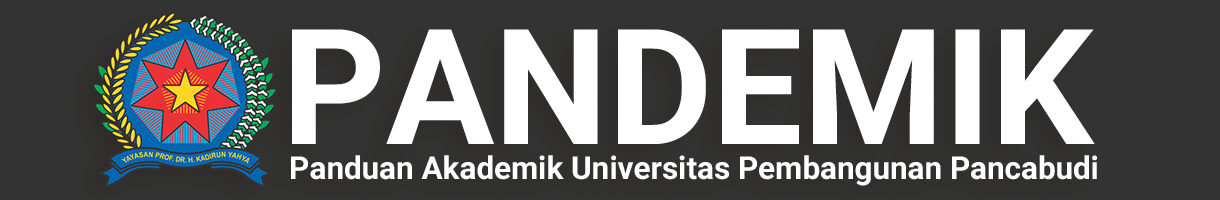
<style>
.page{position:relative;width:1220px;height:200px;background:#333333}
.page>*{position:absolute;margin:0}
.t1{font:161px "Roboto-Bold";color:#ffffff}
.t2{font:31.4px "Roboto-Bold";color:#ffffff}
</style>
<div class="page">
<p class="t1" style="left:292px;top:29px;width:803px;height:115px">PANDEMIK</p>
<p class="t2" style="left:291px;top:155px;width:806px;height:31px">Panduan Akademik Universitas Pembangunan Pancabudi</p>
</div>
